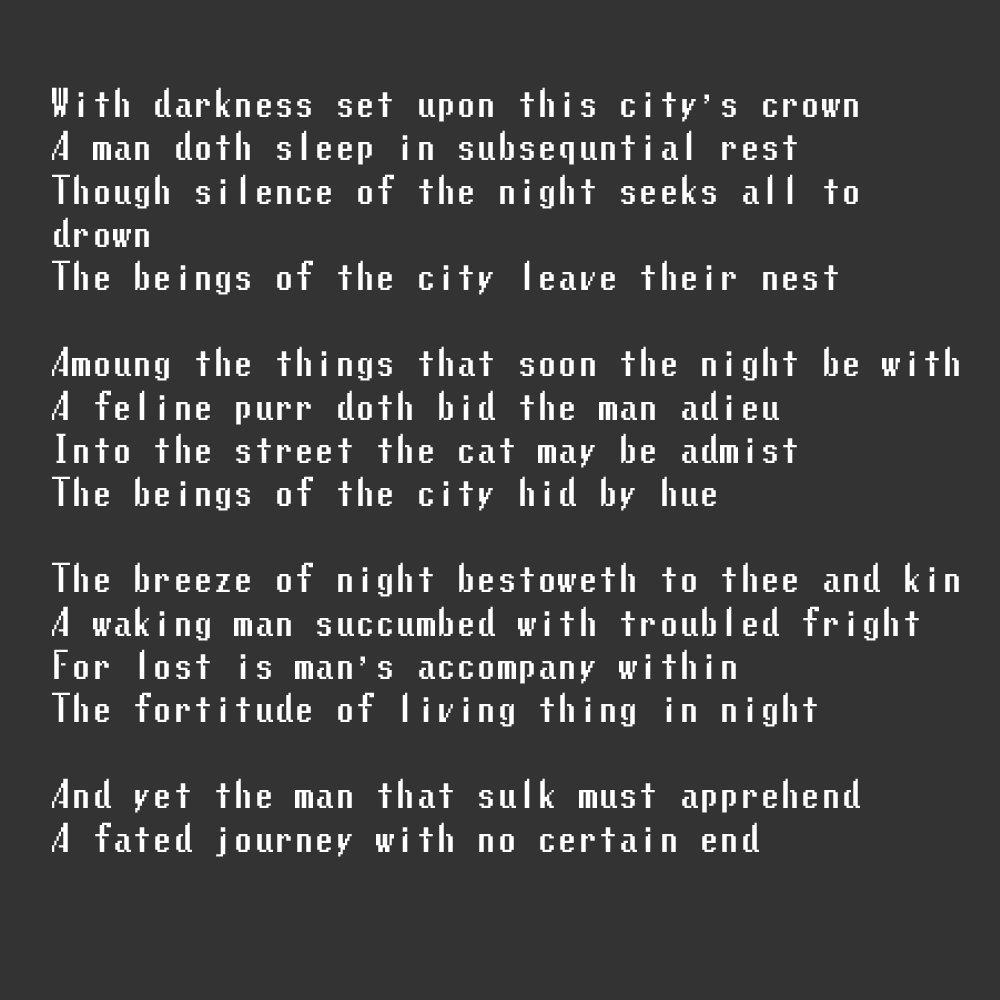
<style>
.page{position:relative;width:1000px;height:1000px;background:#333333}
.page>*{position:absolute;margin:0}
.t1{font:36px "LunchtimeDoublySoReg";color:#ffffff}
</style>
<div class="page">
<p class="t1" style="left:52px;top:87px;width:907px;height:770px">With darkness set upon this city’s crown<br>A man doth sleep in subsequntial rest<br>Though silence of the night seeks all to drown<br>The beings of the city leave their nest<br><br>Amoung the things that soon the night be with<br>A feline purr doth bid the man adieu<br>Into the street the cat may be admist<br>The beings of the city hid by hue<br><br>The breeze of night bestoweth to thee and kin<br>A waking man succumbed with troubled fright<br>For lost is man’s accompany within<br>The fortitude of living thing in night<br><br>And yet the man that sulk must apprehend<br>A fated journey with no certain end</p>
</div>
